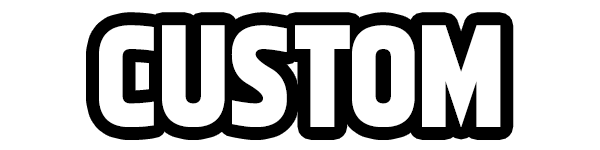
<style>
.page{position:relative;width:600px;height:150px;background:#ffffff}
.page>*{position:absolute;margin:0}
.t1{font:160px "SheSmiles";color:#ffffff}
</style>
<div class="page">
<p class="t1" style="left:99px;top:25px;width:402px;height:102px">custom</p>
</div>
